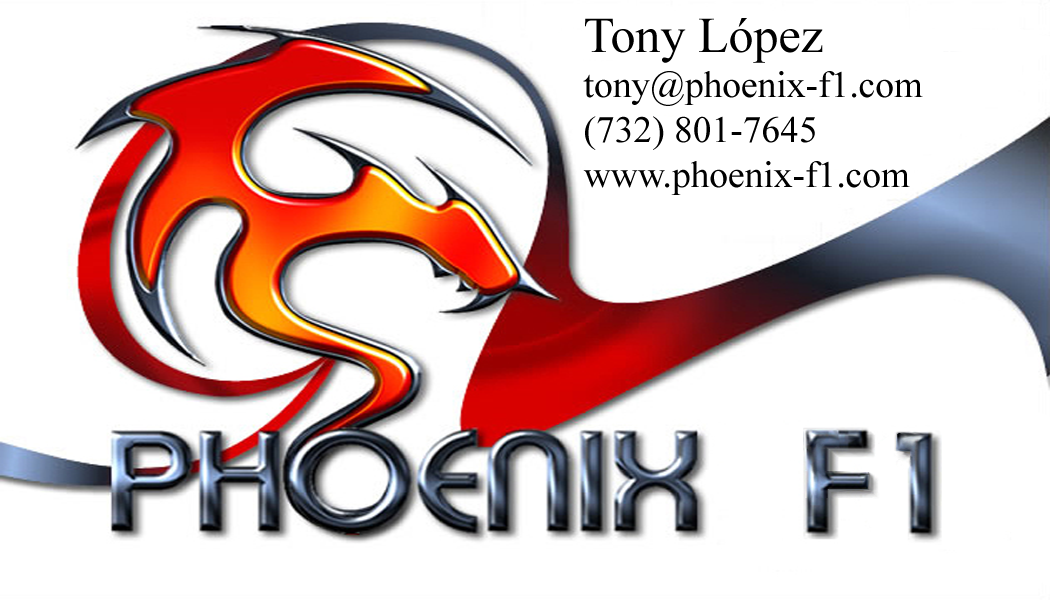
<style>
.page{position:relative;width:1050px;height:600px;background:#ffffff}
.page>*{position:absolute;margin:0}
.t1{font:37.5px "TimesNewRomanPSMT";color:#000000}
.t2{font:50px "TimesNewRomanPSMT";color:#000000}
</style>
<div class="page">
<p class="t1" style="left:583px;top:18px;width:340px;height:177px"><span class="t2">Tony López<br></span>tony@phoenix-f1.com<br>(732) 801-7645<br>www.phoenix-f1.com</p>
</div>
